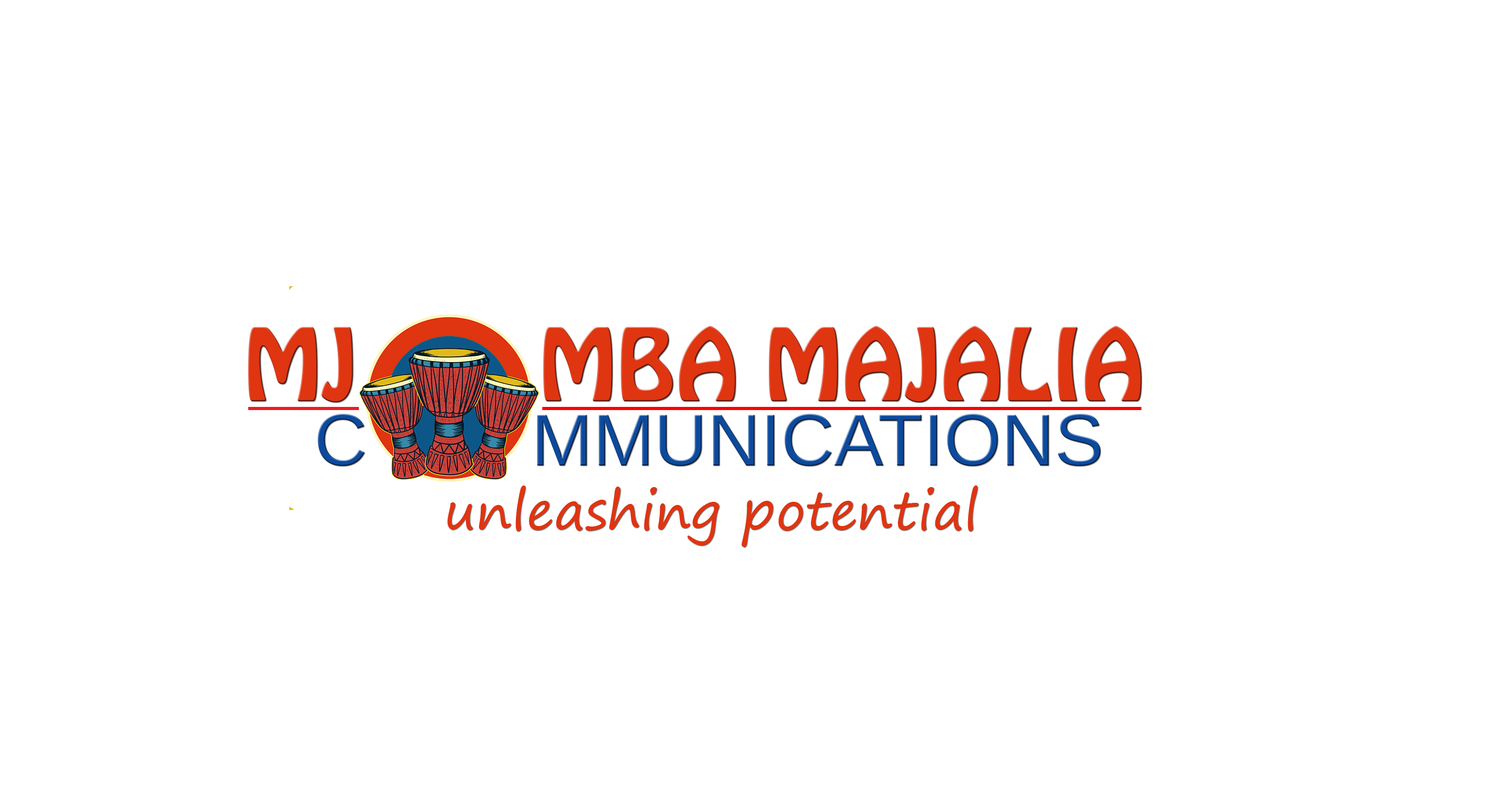
<style>
.page{position:relative;width:1494px;height:798px;background:#ffffff}
.page>*{position:absolute;margin:0}
.t1{font:89.6px "HoboStd";color:#df3511}
.t2{font:73.8px "LiberationSans";color:#0c4a9d}
.t3{font:52.7px "SegoePrint";color:#df3511}
</style>
<div class="page">
<p class="t1" style="left:248px;top:326px;width:894px;height:77px">MJ       MBA MAJALIA</p>
<p class="t2" style="left:318px;top:414px;width:783px;height:52px">C        MMUNICATIONS</p>
<p class="t3" style="left:447px;top:485px;width:531px;height:62px">unleashing potential</p>
</div>
